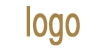
<style>
.page{position:relative;width:100px;height:50px;background:#ffffff}
.page>*{position:absolute;margin:0}
.t1{font:72px "FZHTJW--GB1-0";color:#a98344;font-weight:bold;scale:0.67 1}
</style>
<div class="page">
<p class="t1" style="left:26px;top:6px;width:54px;height:40px">logo</p>
</div>
